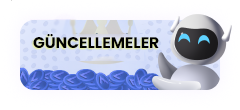
<style>
.page{position:relative;width:240px;height:110px}
.page>*{position:absolute;margin:0}
.t1{font:15.4px "Poppins-Bold";color:#000000}
</style>
<div class="page">
<p class="t1" style="left:33px;top:34px;width:126px;height:14px">GÜNCELLEMELER</p>
</div>
